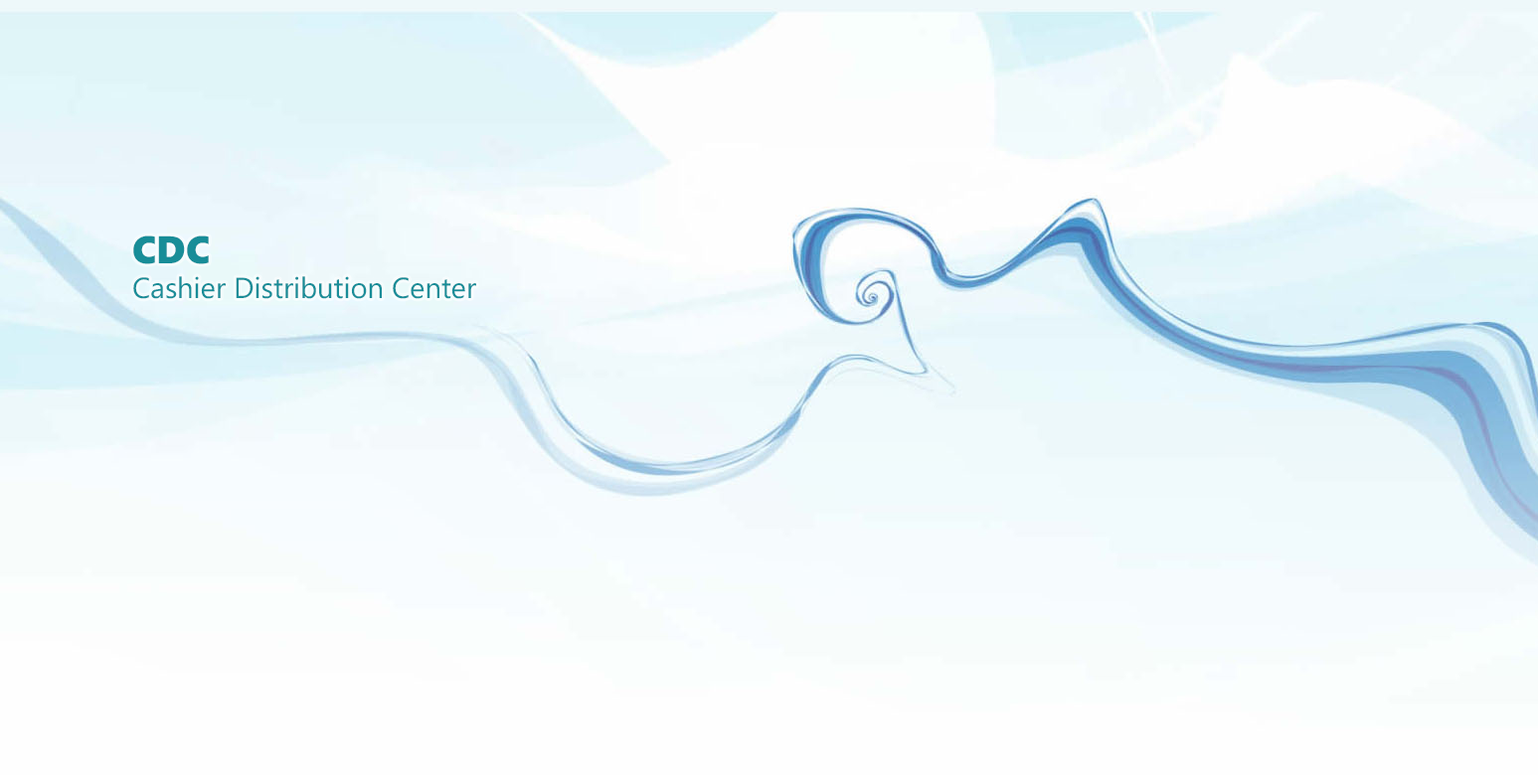
<style>
.page{position:relative;width:1538px;height:775px}
.page>*{position:absolute;margin:0}
.t1{font:29px "SegoeUI";color:#188d98}
.t2{font:38.6px "SegoeUIBlack";color:#188d98}
</style>
<div class="page">
<p class="t1" style="left:133px;top:236px;width:343px;height:63px"><span class="t2">CDC<br></span>Cashier Distribution Center</p>
</div>
